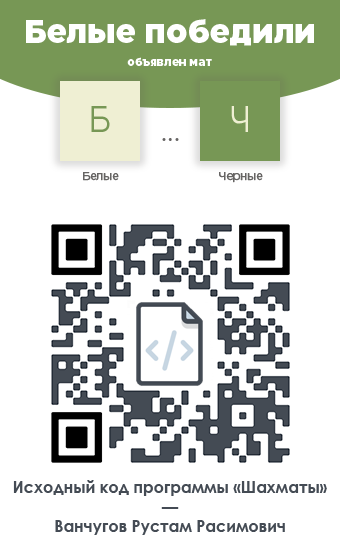
<style>
.page{position:relative;width:340px;height:550px;background:#ffffff}
.page>*{position:absolute;margin:0}
.t1{font:32.6px "EastmanTrial-Extrabold";color:#ffffff;scale:0.95 1}
.t2{font:11.6px "EastmanTrial-Extrabold";color:#ffffff;scale:0.95 1}
.t3{font:37.2px "EastmanTrial-Regular";color:#779755;scale:0.83 1}
.t4{font:37.2px "EastmanTrial-Regular";color:#efefd3;scale:0.83 1}
.t5{font:25.2px "CenturyGothic";color:#666463;scale:0.95 1}
.t6{font:11.6px "EastmanTrial-Regular";color:#666463;font-weight:bold;scale:0.95 1}
.t7{font:16.8px "CenturyGothic-Bold";color:#444b54;scale:0.95 1}
</style>
<div class="page">
<p class="t1" style="left:26px;top:19px;width:288px;height:27px">Белые победили</p>
<p class="t2" style="left:127px;top:57px;width:85px;height:9px">объявлен мат</p>
<p class="t3" style="left:91px;top:106px;width:19px;height:26px">Б</p>
<p class="t4" style="left:231px;top:106px;width:17px;height:26px">Ч</p>
<p class="t5" style="left:162px;top:138px;width:17px;height:3px">...</p>
<p class="t6" style="left:83px;top:172px;width:36px;height:9px">Белые</p>
<p class="t6" style="left:219px;top:172px;width:44px;height:11px">Черные</p>
<p class="t7" style="left:13px;top:480px;width:314px;height:55px;text-align:center">Исходный код программы «Шахматы»<br>—<br>Ванчугов Рустам Расимович</p>
</div>
